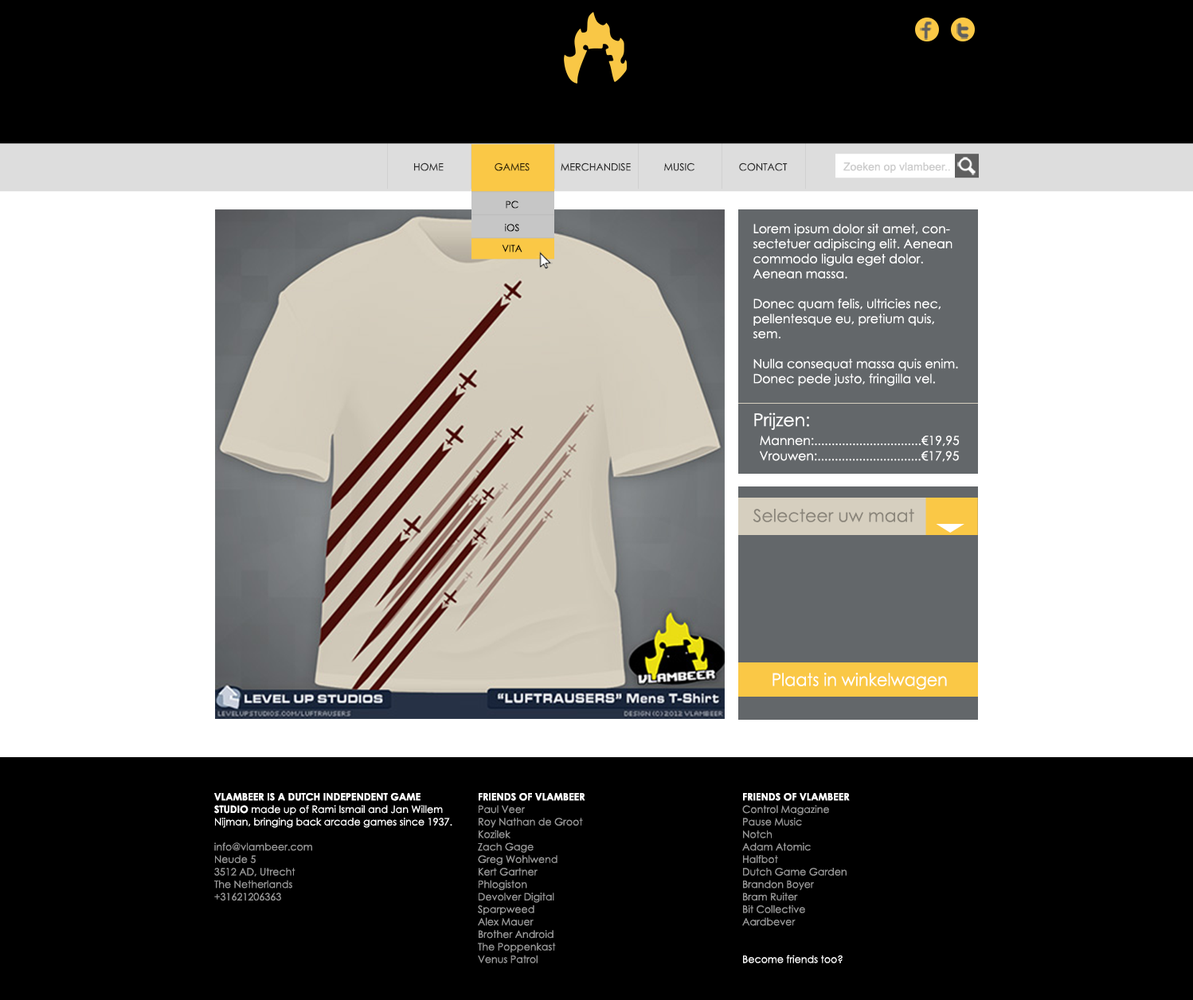
<style>
.page{position:relative;width:1193px;height:1000px;background:#000000}
.page>*{position:absolute;margin:0}
.t1{font:10px "CenturyGothic";color:#2c2c2c}
.t2{font:10px "CenturyGothic";color:#332707}
.t3{font:11.2px "ArialMT";color:#cccccc}
.t4{font:9.6px "CenturyGothic";color:#000000}
.t5{font:12.5px/15px "CenturyGothic";color:#ffffff}
.t6{font:12.5px/15px "CenturyGothic";color:#000000}
.t7{font:17.5px "CenturyGothic";color:#ffffff}
.t8{font:12.5px "CenturyGothic";color:#ffffff}
.t9{font:17.5px "CenturyGothic";color:#8a857a}
.t10{font:17.5px "CenturyGothic";color:#ffffff;scale:0.94 1}
.t11{font:10px/12.5px "CenturyGothic";color:#ffffff}
.t12{font:10px/12.5px "CenturyGothic-Bold";color:#ffffff}
.t13{font:10px/12.5px "CenturyGothic";color:#999999}
</style>
<div class="page">
<p class="t1" style="left:414px;top:162px;width:29px;height:9px">HOME</p>
<p class="t2" style="left:494px;top:162px;width:35px;height:9px">GAMES</p>
<p class="t1" style="left:560px;top:162px;width:71px;height:9px">MERCHANDISE</p>
<p class="t1" style="left:664px;top:162px;width:30px;height:9px">MUSIC</p>
<p class="t1" style="left:739px;top:162px;width:48px;height:9px">CONTACT</p>
<p class="t3" style="left:843px;top:162px;width:107px;height:11px">Zoeken op vlambeer..</p>
<p class="t4" style="left:506px;top:201px;width:12px;height:8px">PC</p>
<p class="t4" style="left:505px;top:224px;width:14px;height:8px">iOS</p>
<p class="t5" style="left:752px;top:224px;width:206px;height:162px">Lorem ipsum dolor sit amet, consectetuer adipiscing elit. Aenean commodo ligula eget dolor. Aenean massa. <br><br>Donec quam felis, ultricies nec, pellentesque eu, pretium quis, sem. <br><br>Nulla consequat massa quis enim. Donec pede justo, fringilla vel. aliquet nec, vulputate eget, <span class="t6">arcu. In enim justo, rhoncus ut, imperdiet a, venenatis vitae, just</span></p>
<p class="t4" style="left:502px;top:244px;width:20px;height:8px">VITA</p>
<p class="t7" style="left:754px;top:412px;width:55px;height:18px">Prijzen:</p>
<p class="t8" style="left:759px;top:435px;width:200px;height:12px">Mannen:...............................€19,95</p>
<p class="t8" style="left:759px;top:451px;width:200px;height:11px">Vrouwen:..............................€17,95</p>
<p class="t9" style="left:752px;top:509px;width:162px;height:13px">Selecteer uw maat</p>
<p class="t10" style="left:772px;top:673px;width:175px;height:17px">Plaats in winkelwagen</p>
<p class="t11" style="left:214px;top:793px;width:238px;height:108px"><span class="t12">VLAMBEER IS A DUTCH INDEPENDENT GAME STUDIO</span> made up of Rami Ismail and Jan Willem Nijman, bringing back arcade games since 1937.<br><br><span class="t13">info@vlambeer.com <br>Neude 5<br>3512 AD, Utrecht<br>The Netherlands<br>+31621206363</span></p>
<p class="t13" style="left:478px;top:793px;width:107px;height:170px"><span class="t12">FRIENDS OF VLAMBEER<br></span>Paul Veer<br>Roy Nathan de Groot<br>Kozilek<br>Zach Gage<br>Greg Wohlwend<br>Kert Gartner<br>Phlogiston<br>Devolver Digital<br>Sparpweed<br>Alex Mauer<br>Brother Android<br>The Poppenkast<br>Venus Patrol</p>
<p class="t13" style="left:742px;top:793px;width:107px;height:170px"><span class="t12">FRIENDS OF VLAMBEER<br></span>Control Magazine<br>Pause Music<br>Notch<br>Adam Atomic<br>Halfbot<br>Dutch Game Garden<br>Brandon Boyer<br>Bram Ruiter<br>Bit Collective<br>Aardbever<br><br><br><span class="t11">Become friends too?</span></p>
</div>
